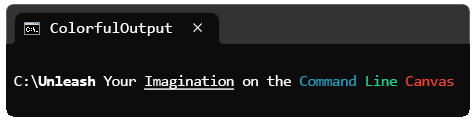
<style>
.page{position:relative;width:476px;height:123px;background:#0c0c0c}
.page>*{position:absolute;margin:0}
.t1{font:16px "Consolas";color:#ffffff}
.t2{font:16px "Consolas";letter-spacing:-0.04em;color:#ffffff;text-decoration:underline}
.t3{font:16px "Consolas";letter-spacing:-0.04em;color:#ffffff}
.t4{font:16px "Consolas-Bold";letter-spacing:-0.04em;color:#ffffff}
.t5{font:16px "Consolas";letter-spacing:-0.04em;color:#229fbf}
.t6{font:16px "Consolas";letter-spacing:-0.04em;color:#1ed18b}
.t7{font:16px "Consolas";letter-spacing:-0.04em;color:#f1402d}
</style>
<div class="page">
<p class="t1" style="left:50px;top:22px;width:122px;height:14px">ColorfulOutput</p>
<p class="t2" style="left:14px;top:75px;width:440px;height:15px"><span class="t3">C:\</span><span class="t4">Unleash</span><span class="t3"> Your </span>Imagination<span class="t3"> on the </span><span class="t5">Command </span><span class="t6">Line </span><span class="t7">Canvas</span></p>
</div>
